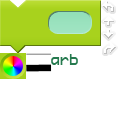
<style>
.page{position:relative;width:128px;height:128px;background:#ffffff}
.page>*{position:absolute;margin:0}
.t1{font:14px "ProFontWindows";color:#267a4f}
</style>
<div class="page">
<p class="t1" style="left:51px;top:54px;width:27px;height:11px">arb</p>
</div>
